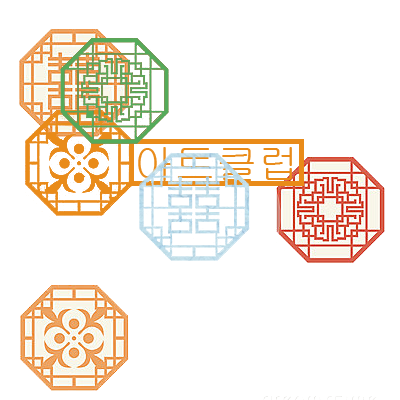
<style>
.page{position:relative;width:400px;height:400px;background:#ffffff}
.page>*{position:absolute;margin:0}
.t1{font:41.7px "Gulim";color:#e98b19}
</style>
<div class="page">
<p class="t1" style="left:138px;top:147px;width:154px;height:34px">아트클럽</p>
</div>
